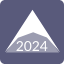
<style>
.page{position:relative;width:64px;height:64px;background:#595a7b}
.page>*{position:absolute;margin:0}
.t1{font:13.8px "Lato-Regular";color:#ffffff}
</style>
<div class="page">
<p class="t1" style="left:16px;top:41px;width:32px;height:10px">2024</p>
</div>
